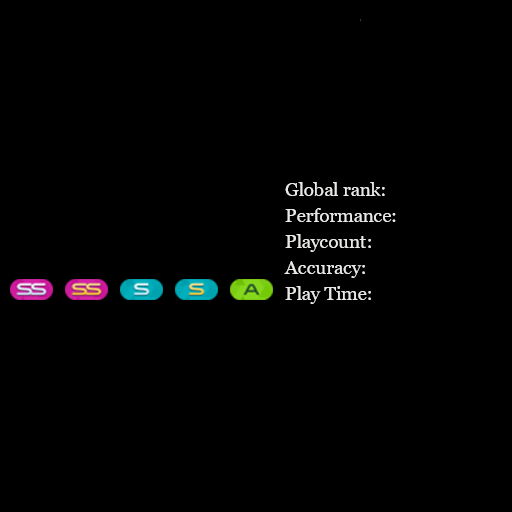
<style>
.page{position:relative;width:512px;height:512px;background:#000000}
.page>*{position:absolute;margin:0}
.t1{font:18.7px "Georgia";color:#e9e8e6}
</style>
<div class="page">
<p class="t1" style="left:285px;top:182px;width:100px;height:14px">Global rank:</p>
<p class="t1" style="left:285px;top:208px;width:111px;height:14px">Performance:</p>
<p class="t1" style="left:285px;top:234px;width:86px;height:18px">Playcount:</p>
<p class="t1" style="left:284px;top:261px;width:81px;height:17px">Accuracy:</p>
<p class="t1" style="left:285px;top:286px;width:86px;height:18px">Play Time:</p>
</div>
